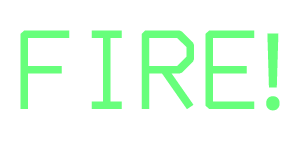
<style>
.page{position:relative;width:300px;height:150px;background:#ffffff}
.page>*{position:absolute;margin:0}
.t1{font:112px "HornetDisplay-Bold";color:#67ff7b}
.t2{font:112px "MyriadPro-Regular";color:#67ff7b}
</style>
<div class="page">
<p class="t1" style="left:20px;top:30px;width:260px;height:81px">fire<span class="t2">!</span></p>
</div>
